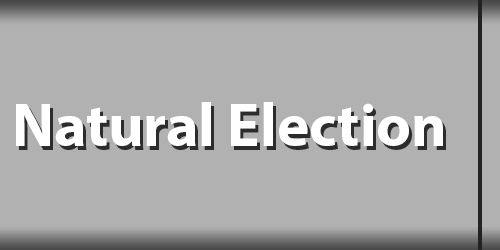
<style>
.page{position:relative;width:500px;height:250px;background:#b1b1b1}
.page>*{position:absolute;margin:0}
.t1{font:60.7px "MyriadPro-Bold";color:#ffffff}
</style>
<div class="page">
<p class="t1" style="left:16px;top:102px;width:427px;height:44px">Natural Election</p>
</div>
